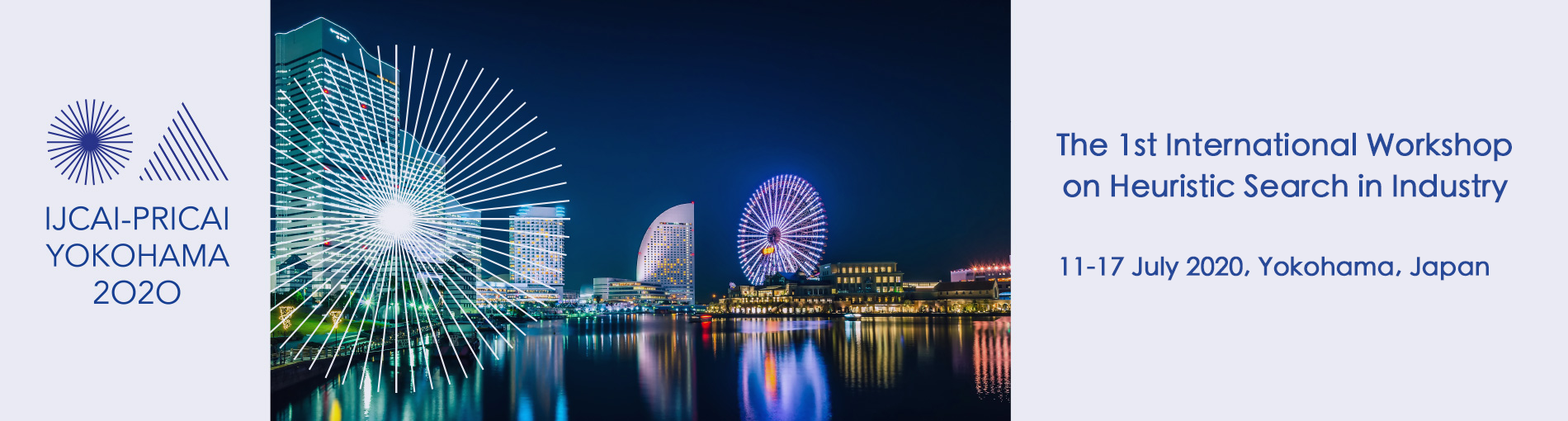
<style>
.page{position:relative;width:1568px;height:421px;background:#eaeaf4}
.page>*{position:absolute;margin:0}
.t1{font:29.7px/41.3px "STHeitiSC-Medium";color:#274998;font-weight:bold}
.t2{font:24.8px "STHeitiSC-Medium";color:#274998;font-weight:bold}
</style>
<div class="page">
<p class="t1" style="left:1056px;top:132px;width:456px;height:71px;text-align:center">The 1st International Workshop on Heuristic Search in Industry</p>
<p class="t2" style="left:1060px;top:256px;width:429px;height:25px">11-17 July 2020, Yokohama, Japan</p>
</div>
